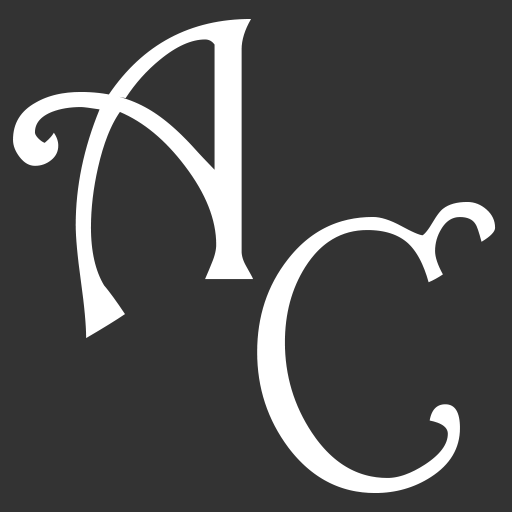
<style>
.page{position:relative;width:512px;height:512px;background:#333333}
.page>*{position:absolute;margin:0}
.t1{font:337.1px "RossettiW00-Regular";letter-spacing:0.025em;color:#ffffff}
.t2{font:355.3px "RossettiW00-Regular";letter-spacing:0.025em;color:#ffffff}
</style>
<div class="page">
<p class="t1" style="left:13px;top:19px;width:240px;height:319px">A</p>
<p class="t2" style="left:257px;top:202px;width:239px;height:291px">C</p>
</div>
